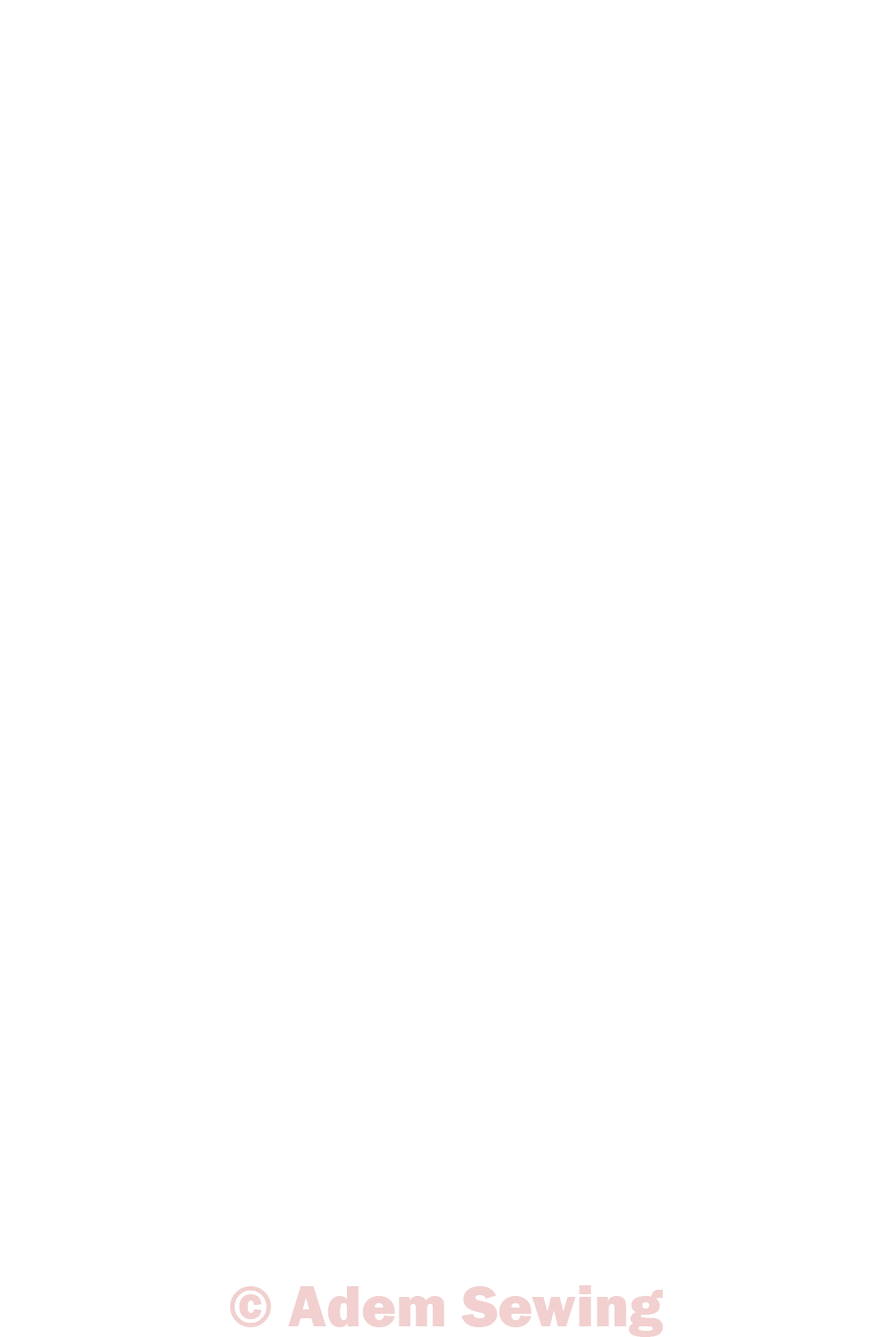
<style>
.page{position:relative;width:892px;height:1337px;background:#ffffff}
.page>*{position:absolute;margin:0}
.t1{font:59.4px "FranklinGothic-Heavy";color:#f2d0d0}
</style>
<div class="page">
<p class="t1" style="left:230px;top:1286px;width:432px;height:51px">© Adem Sewing</p>
</div>
